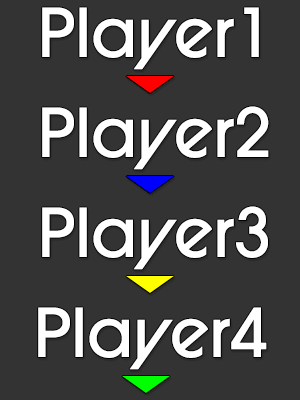
<style>
.page{position:relative;width:300px;height:400px;background:#333333}
.page>*{position:absolute;margin:0}
.t1{font:66.7px "ITCAvantGardePro-Md";color:#ffffff}
</style>
<div class="page">
<p class="t1" style="left:42px;top:7px;width:217px;height:63px">Player1</p>
<p class="t1" style="left:42px;top:106px;width:227px;height:64px">Player2</p>
<p class="t1" style="left:42px;top:206px;width:226px;height:64px">Player3</p>
<p class="t1" style="left:38px;top:307px;width:229px;height:63px">Player4</p>
</div>
